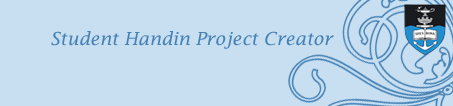
<style>
.page{position:relative;width:453px;height:106px;background:#c8dff2}
.page>*{position:absolute;margin:0}
.t1{font:18px "LucidaFax-Italic";color:#4682b4}
</style>
<div class="page">
<p class="t1" style="left:51px;top:31px;width:283px;height:18px">Student Handin Project Creator</p>
</div>
